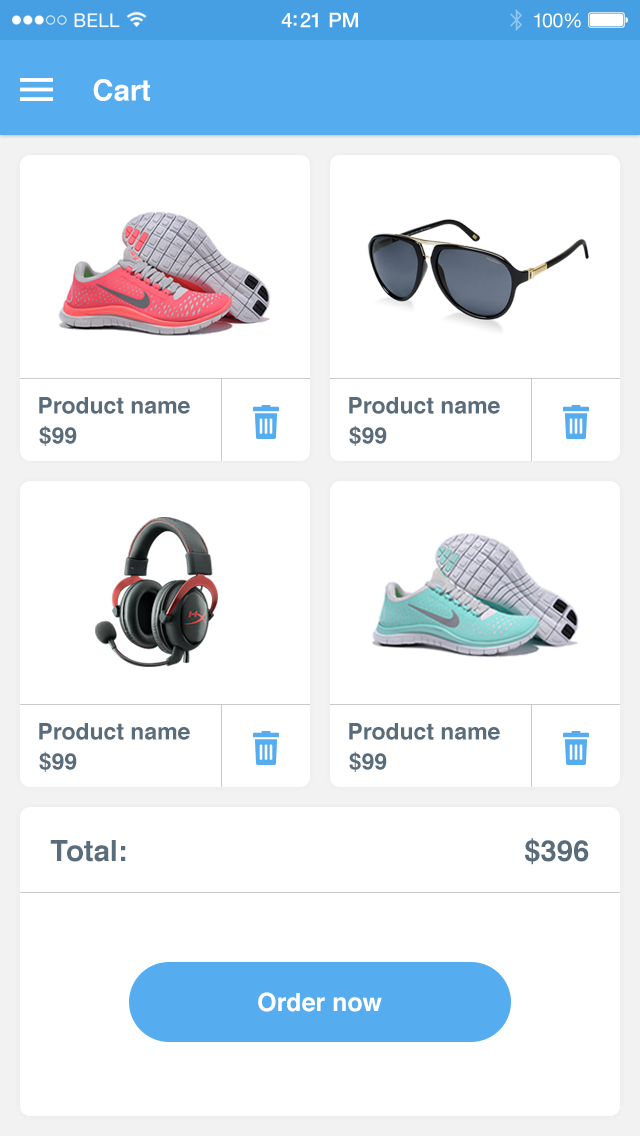
<style>
.page{position:relative;width:640px;height:1136px;background:#ffffff}
.page>*{position:absolute;margin:0}
.t1{font:20.4px "HelveticaNeue-Medium";letter-spacing:-0.02em;color:#ffffff}
.t2{font:19.6px "HelveticaNeue";letter-spacing:-0.02em;color:#ffffff}
.t3{font:29.2px "Helvetica-Bold";color:#ffffff}
.t4{font:22.9px "Helvetica-Bold";color:#596c7b}
.t5{font:29.2px "Helvetica-Bold";color:#596c7b}
.t6{font:25px "Helvetica-Bold";color:#ffffff}
</style>
<div class="page">
<p class="t1" style="left:281px;top:12px;width:77px;height:16px">4:21 PM</p>
<p class="t2" style="left:534px;top:13px;width:47px;height:15px">100%</p>
<p class="t3" style="left:93px;top:79px;width:57px;height:22px">Cart</p>
<p class="t4" style="left:39px;top:397px;width:151px;height:17px">Product name</p>
<p class="t4" style="left:349px;top:397px;width:151px;height:17px">Product name</p>
<p class="t4" style="left:39px;top:425px;width:38px;height:21px">$99</p>
<p class="t4" style="left:349px;top:425px;width:38px;height:21px">$99</p>
<p class="t4" style="left:39px;top:723px;width:151px;height:17px">Product name</p>
<p class="t4" style="left:349px;top:723px;width:151px;height:17px">Product name</p>
<p class="t4" style="left:39px;top:751px;width:38px;height:21px">$99</p>
<p class="t4" style="left:349px;top:751px;width:38px;height:21px">$99</p>
<p class="t5" style="left:50px;top:840px;width:76px;height:22px">Total:</p>
<p class="t5" style="left:525px;top:838px;width:64px;height:27px">$396</p>
<p class="t6" style="left:258px;top:992px;width:124px;height:20px">Order now</p>
</div>
